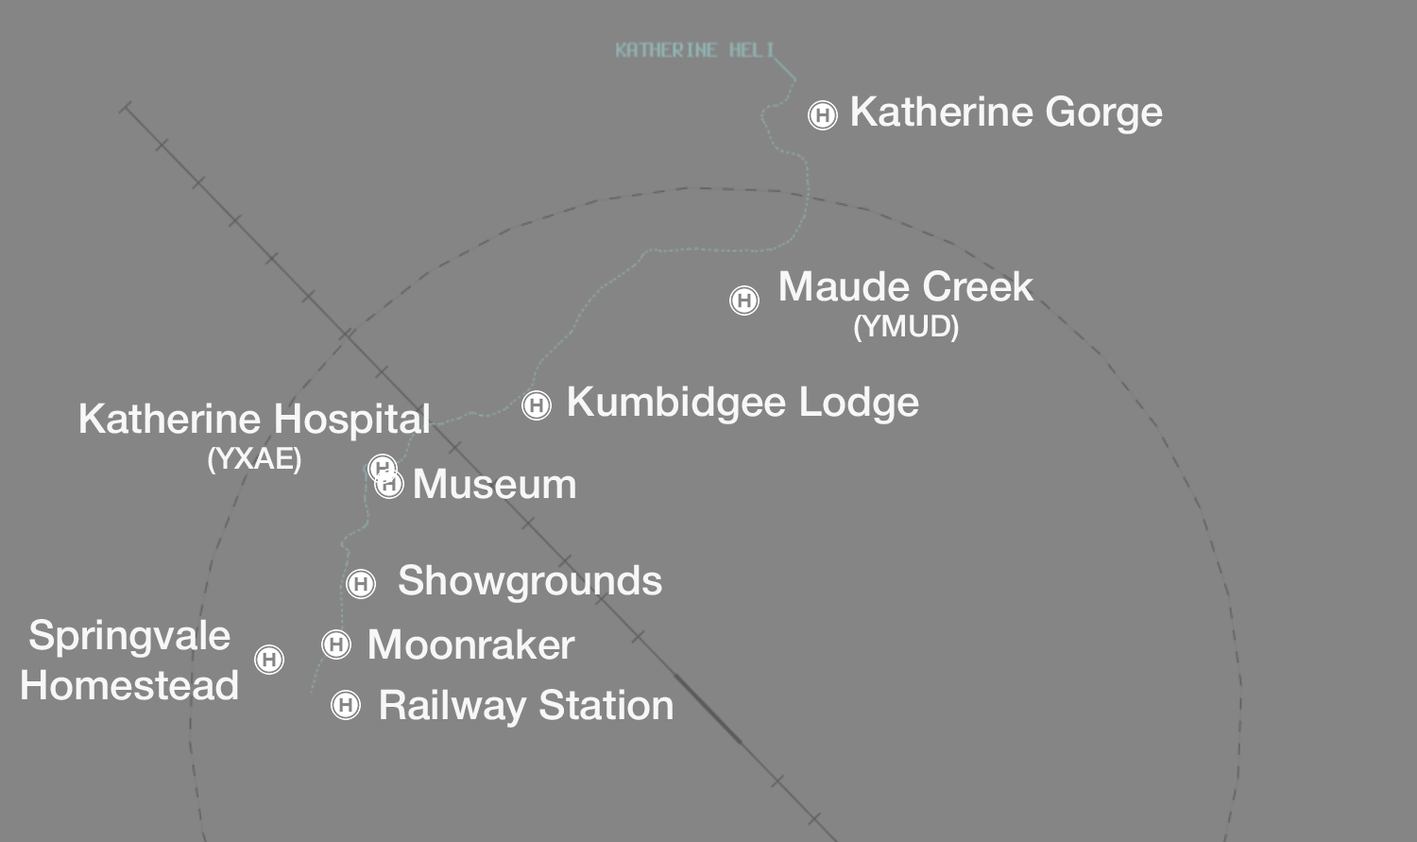
<style>
.page{position:relative;width:1417px;height:842px;background:#858585}
.page>*{position:absolute;margin:0}
.t1{font:41.6px "HelveticaNeue-Medium";color:#f7f7f7}
.t2{font:30.2px "HelveticaNeue-Medium";color:#f7f7f7}
</style>
<div class="page">
<p class="t1" style="left:852px;top:95px;width:311px;height:39px">Katherine Gorge</p>
<p class="t1" style="left:780px;top:270px;width:254px;height:73px;text-align:center">Maude Creek<br><span class="t2">(YMUD)</span></p>
<p class="t1" style="left:569px;top:385px;width:350px;height:39px">Kumbidgee Lodge</p>
<p class="t1" style="left:80px;top:402px;width:349px;height:73px;text-align:center">Katherine Hospital<br><span class="t2">(YXAE)</span></p>
<p class="t1" style="left:415px;top:468px;width:160px;height:31px">Museum</p>
<p class="t1" style="left:399px;top:564px;width:263px;height:39px">Showgrounds</p>
<p class="t1" style="left:22px;top:619px;width:216px;height:81px;text-align:center">Springvale<br>Homestead</p>
<p class="t1" style="left:369px;top:628px;width:206px;height:31px">Moonraker</p>
<p class="t1" style="left:381px;top:689px;width:292px;height:38px">Railway Station</p>
</div>
